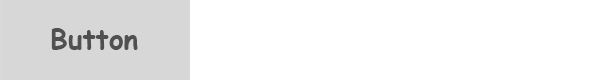
<style>
.page{position:relative;width:600px;height:80px;background:#ffffff}
.page>*{position:absolute;margin:0}
.t1{font:28px "ComicSansMS-Bold";color:#505050}
</style>
<div class="page">
<p class="t1" style="left:51px;top:28px;width:87px;height:22px">Button</p>
</div>
